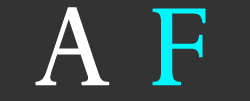
<style>
.page{position:relative;width:250px;height:101px;background:#333333}
.page>*{position:absolute;margin:0}
.t1{font:132px "Perpetua";color:#ffffff;font-weight:bold}
.t2{font:132px "Perpetua";color:#00f6ff;font-weight:bold}
</style>
<div class="page">
<p class="t1" style="left:35px;top:7px;width:171px;height:79px">A <span class="t2">F</span></p>
</div>
